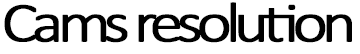
<style>
.page{position:relative;width:360px;height:54px;background:#ffffff}
.page>*{position:absolute;margin:0}
.t1{font:56.7px "Calibri-Light";letter-spacing:-0.115em;color:#000000;font-weight:bold;scale:1.18 1}
</style>
<div class="page">
<p class="t1" style="left:4px;top:2px;width:348px;height:41px">Cams resolution</p>
</div>
